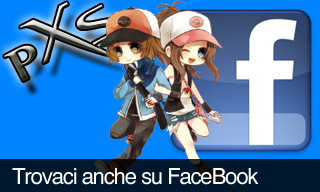
<style>
.page{position:relative;width:320px;height:192px}
.page>*{position:absolute;margin:0}
.t1{font:72px "ResidentEvil-Regular";letter-spacing:-0.05em}
.t2{font:100px "ResidentEvil-Regular";letter-spacing:-0.05em}
.t3{font:22px "HelveticaCE-Regular";letter-spacing:-0.05em;color:#ffffff}
</style>
<div class="page">
<p class="t1" style="left:4px;top:2px;width:121px;height:80px;rotate:-28deg">P<span class="t2">X</span>S</p>
<p class="t3" style="left:12px;top:168px;width:247px;height:17px">Trovaci anche su FaceBook</p>
</div>
